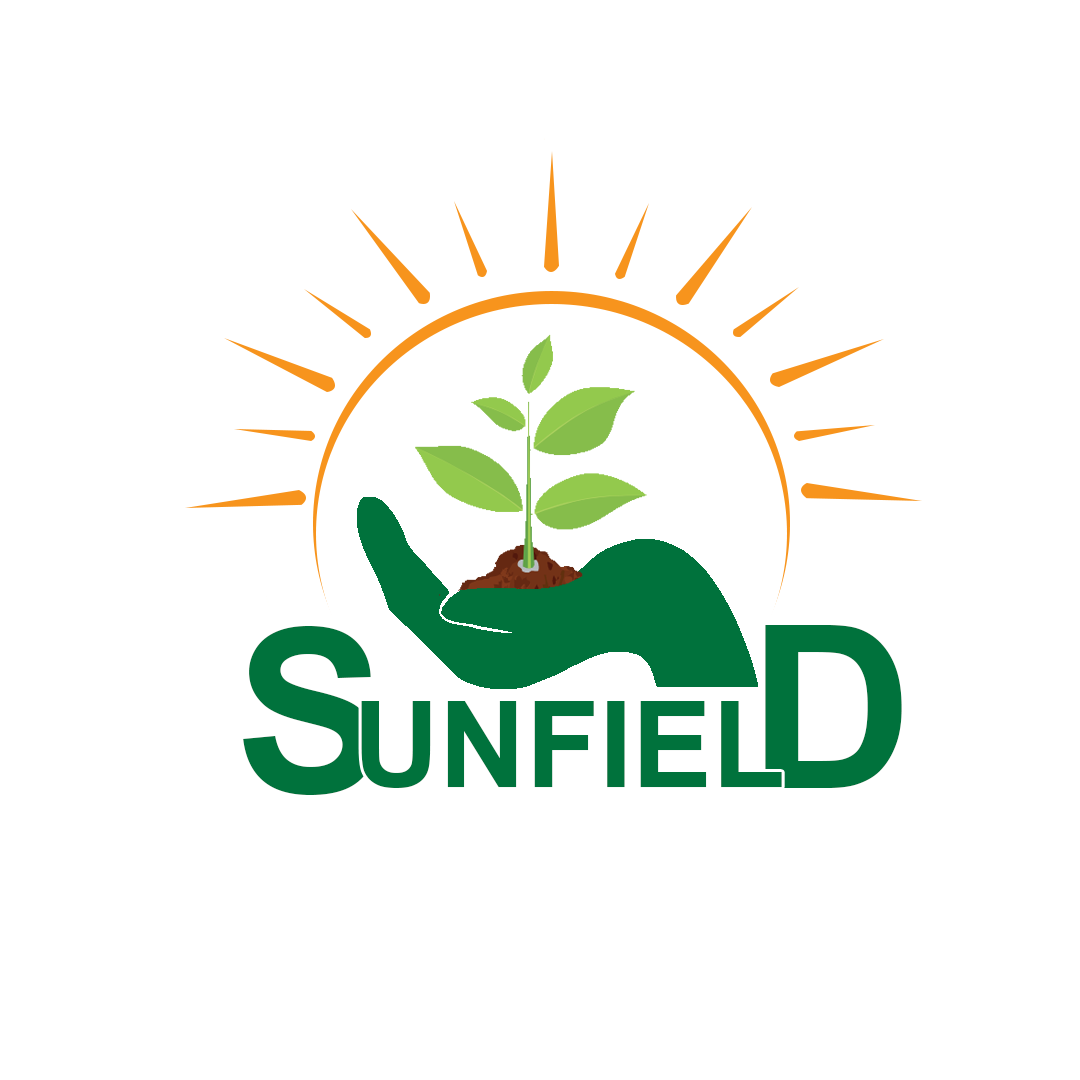
<style>
.page{position:relative;width:1080px;height:1080px;background:#ffffff}
.page>*{position:absolute;margin:0}
.t1{font:226.6px "Arial-BoldMT";color:#00723c}
.t2{font:119.7px "Arial-BoldMT";color:#00723c}
</style>
<div class="page">
<p class="t1" style="left:243px;top:626px;width:133px;height:169px">S</p>
<p class="t1" style="left:765px;top:625px;width:137px;height:163px">D</p>
<p class="t2" style="left:361px;top:701px;width:421px;height:87px">UNFIEL</p>
</div>
